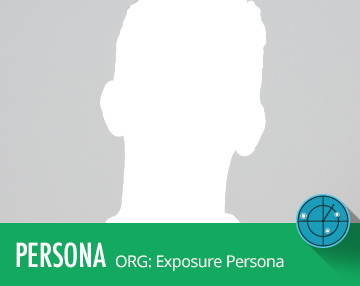
<style>
.page{position:relative;width:360px;height:286px;background:#ffffff}
.page>*{position:absolute;margin:0}
.t1{font:32px "Futura-CondensedMedium";letter-spacing:-0.01em;color:#ffffff}
.t2{font:16px "OpenSans";letter-spacing:-0.025em;color:#ffffff}
</style>
<div class="page">
<p class="t1" style="left:16px;top:242px;width:90px;height:26px">PERSONA</p>
<p class="t2" style="left:116px;top:255px;width:168px;height:16px">ORG: Exposure Persona</p>
</div>
